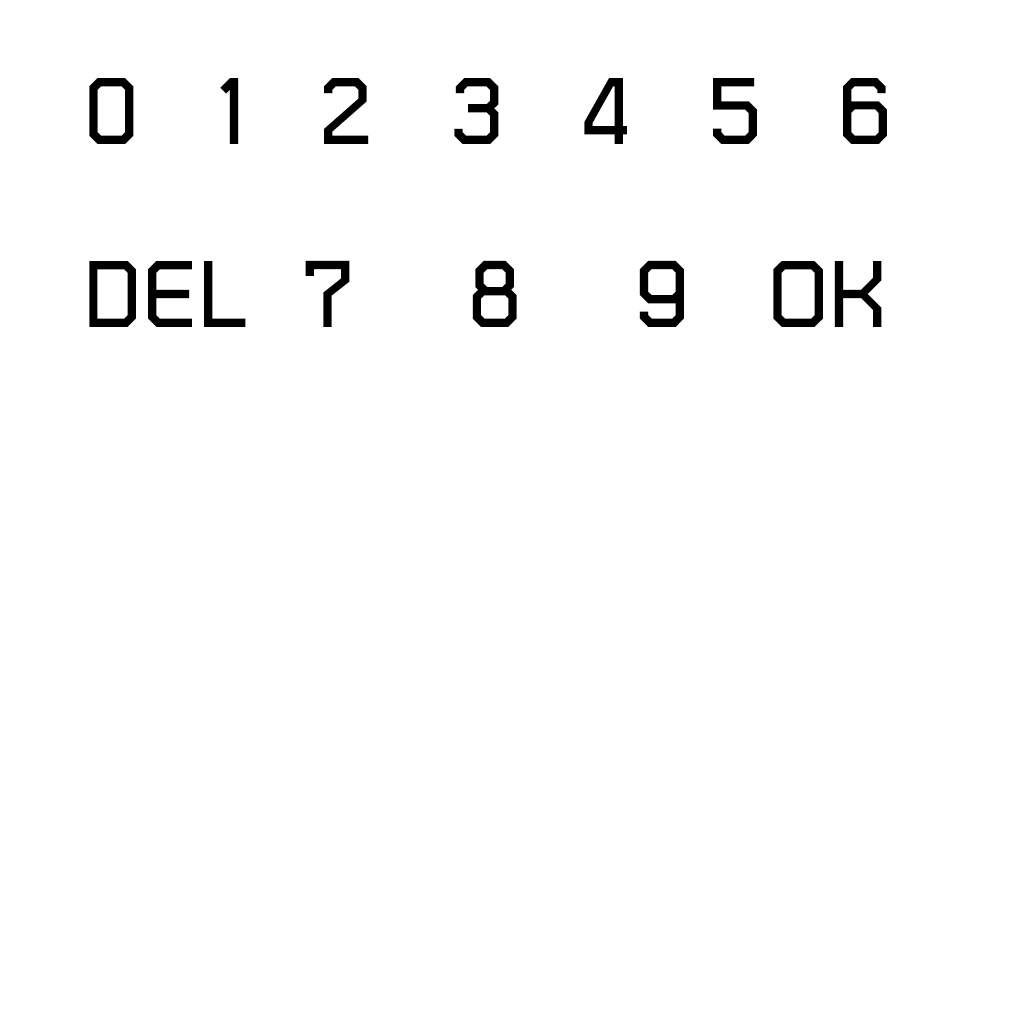
<style>
.page{position:relative;width:1024px;height:1024px;background:#ffffff}
.page>*{position:absolute;margin:0}
.t1{font:152.4px "THChakraPetch-Bold";color:#000000}
</style>
<div class="page">
<p class="t1" style="left:89px;top:78px;width:798px;height:249px">0  1  2  3  4  5  6<br>DEL  7   8   9   OK</p>
</div>
